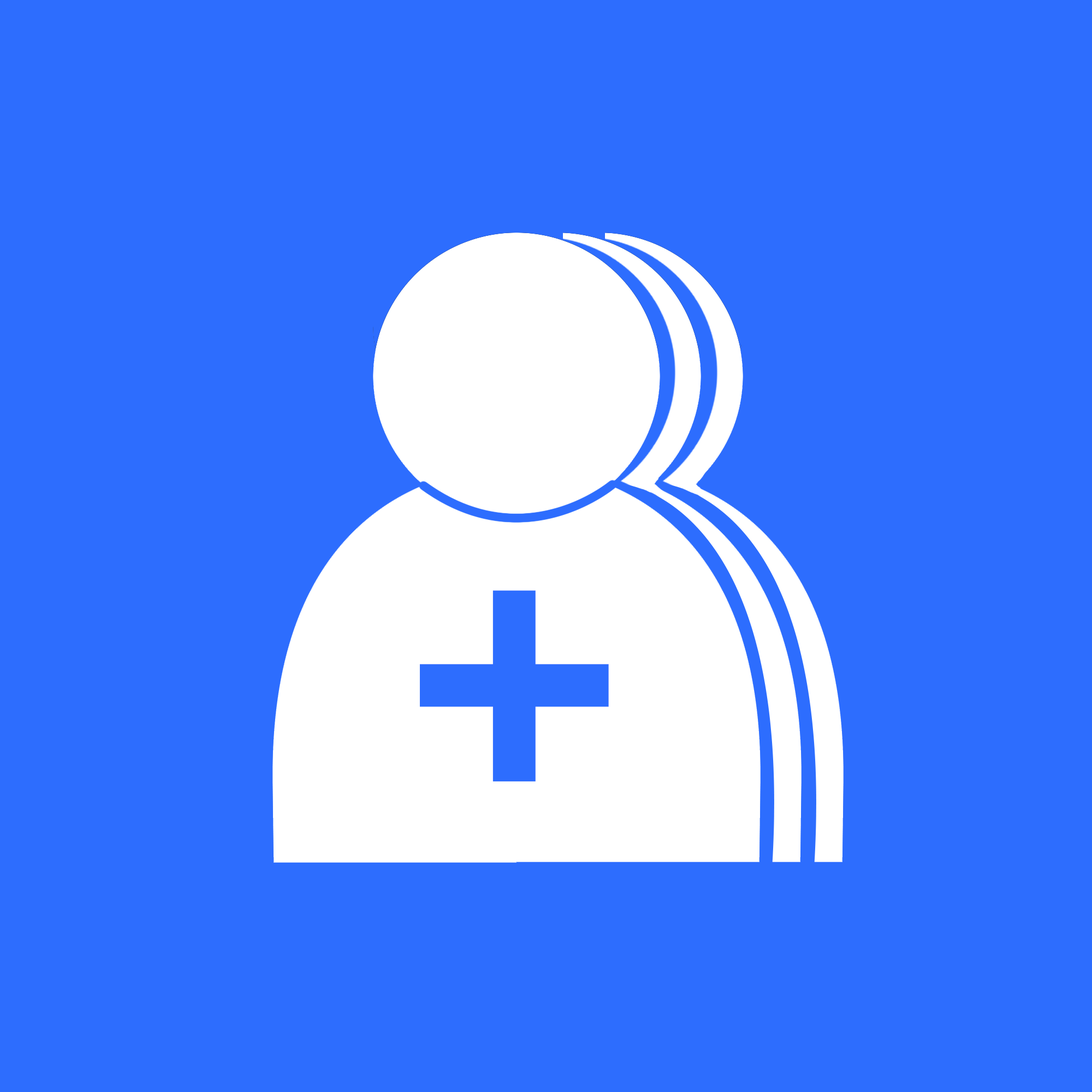
<style>
.page{position:relative;width:1092px;height:1092px;background:#2d6dfe}
.page>*{position:absolute;margin:0}
.t1{font:545.5px "BebasNeue-Regular";color:#2d6dfe}
</style>
<div class="page">
<p class="t1" style="left:419px;top:590px;width:190px;height:192px">+</p>
</div>
